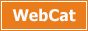
<style>
.page{position:relative;width:88px;height:31px;background:#ea7c1b}
.page>*{position:absolute;margin:0}
.t1{font:16px "Tahoma-Bold";color:#f9fbfd}
</style>
<div class="page">
<p class="t1" style="left:12px;top:8px;width:64px;height:14px">WebCat</p>
</div>
